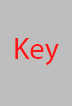
<style>
.page{position:relative;width:72px;height:106px;background:#bebebe}
.page>*{position:absolute;margin:0}
.t1{font:30px "MyriadPro-Regular";color:#ff1515}
</style>
<div class="page">
<p class="t1" style="left:15px;top:38px;width:44px;height:28px">Key</p>
</div>
